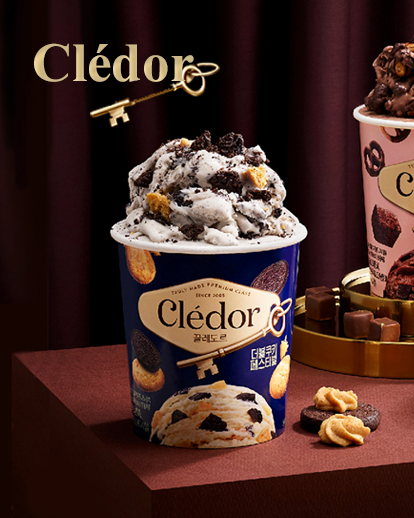
<style>
.page{position:relative;width:414px;height:518px}
.page>*{position:absolute;margin:0}
.t1{font:55.1px "TimesNewRomanPS-BoldMT";color:#cfba8a}
</style>
<div class="page">
<p class="t1" style="left:34px;top:43px;width:160px;height:39px">Clédor</p>
</div>
